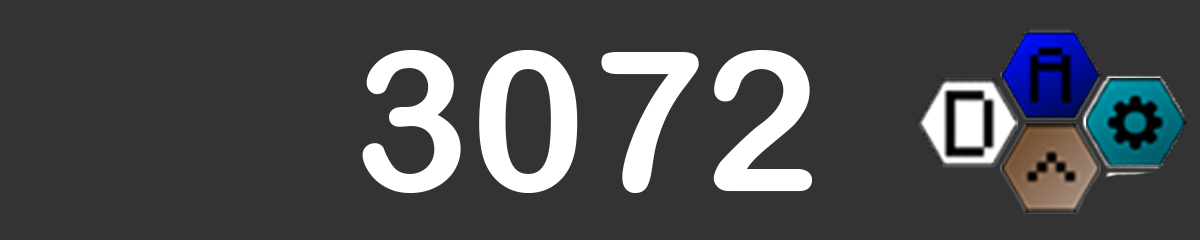
<style>
.page{position:relative;width:1200px;height:240px;background:#333333}
.page>*{position:absolute;margin:0}
.t1{font:196.5px "ArialRoundedMTBold";color:#ffffff}
</style>
<div class="page">
<p class="t1" style="left:362px;top:50px;width:450px;height:143px">3072</p>
</div>
